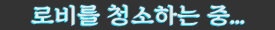
<style>
.page{position:relative;width:275px;height:30px;background:#333333}
.page>*{position:absolute;margin:0}
.t1{font:23.3px "SDKukdetopokki-aLt";color:#faffff;scale:1.08 1}
</style>
<div class="page">
<p class="t1" style="left:31px;top:4px;width:214px;height:22px;opacity:0.9">로비를 청소하는 중...</p>
</div>
